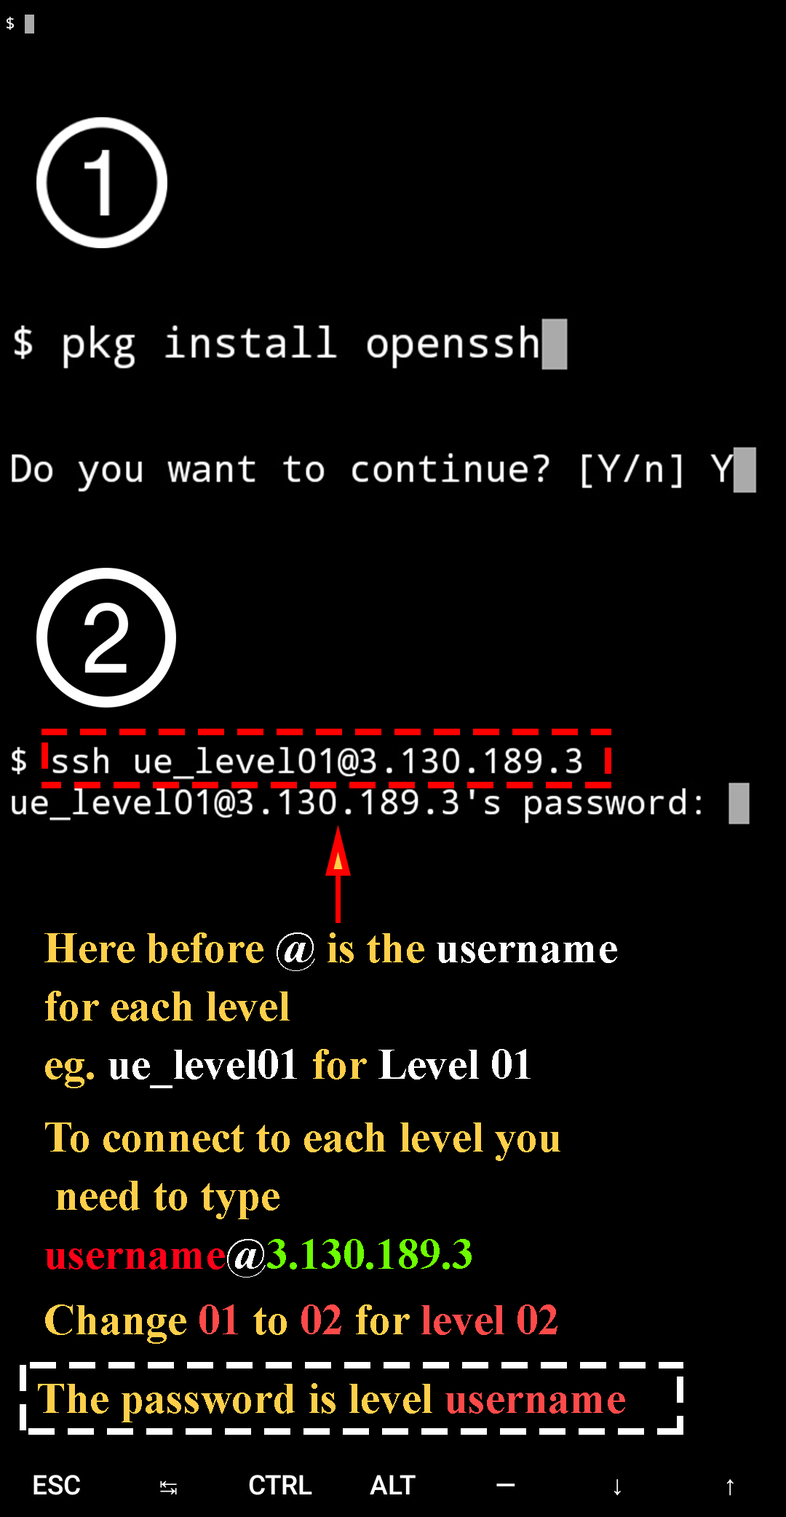
<style>
.page{position:relative;width:786px;height:1517px;background:#000000}
.page>*{position:absolute;margin:0}
.t1{font:43.7px/7.3px "TimesNewRomanPS-BoldMT";color:#ffcf4a}
.t2{font:43.7px/7.3px "TimesNewRomanPS-BoldMT";color:#ffffff}
.t3{font:43.7px/7.3px "TimesNewRomanPS-BoldMT";color:#ff0018}
.t4{font:43.7px/7.3px "TimesNewRomanPS-BoldMT";color:#6cff00}
.t5{font:43.7px/7.3px "TimesNewRomanPS-BoldMT";color:#ff4a4a}
.t6{font:43.7px "TimesNewRomanPS-BoldMT";color:#ffcf4a}
.t7{font:43.7px "TimesNewRomanPS-BoldMT";color:#ff4a4a}
</style>
<div class="page">
<p class="t1" style="left:44px;top:932px;width:573px;height:412px">Here before <span class="t2">@ </span>is the <span class="t2">username</span> <br><br><br><br><br><br><br><br>for each level<br><br><br><br><br><br><br><br>eg. <span class="t2">ue_level01</span> for <span class="t2">Level 01<br><br><br><br><br><br><br><br><br><br></span>To connect to each level you<br><br><br><br><br><br><br><br> need to type<br><br><br><br><br><br><br><br><span class="t3">username</span><span class="t2">@</span><span class="t4">3.130.189.3<br><br><br><br><br><br><br><br><br></span>Change<span class="t5"> 01</span> to <span class="t5">02</span> for <span class="t5">level 02</span></p>
<p class="t6" style="left:38px;top:1383px;width:587px;height:39px">The password is level <span class="t7">username</span></p>
</div>
